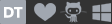
<style>
.page{position:relative;width:112px;height:24px;background:#333333}
.page>*{position:absolute;margin:0}
.t1{font:14.9px "Montserrat-Bold";letter-spacing:-0.02em;color:#ffffff;text-transform:uppercase}
</style>
<div class="page">
<p class="t1" style="left:4px;top:7px;width:19px;height:11px">DT</p>
</div>
